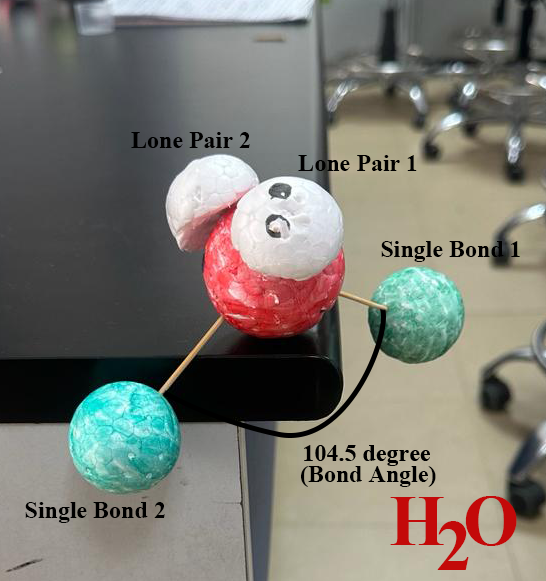
<style>
.page{position:relative;width:546px;height:581px}
.page>*{position:absolute;margin:0}
.t1{font:24px "TimesNewRomanPS-BoldMT";color:#000000}
.t2{font:72px "TimesNewRomanPS-BoldMT";color:#c30909}
</style>
<div class="page">
<p class="t1" style="left:131px;top:132px;width:119px;height:16px">Lone Pair 2</p>
<p class="t1" style="left:298px;top:155px;width:119px;height:16px">Lone Pair 1</p>
<p class="t1" style="left:381px;top:241px;width:139px;height:21px">Single Bond 1</p>
<p class="t1" style="left:301px;top:466px;width:135px;height:21px">(Bond Angle)</p>
<p class="t2" style="left:390px;top:496px;width:127px;height:50px">H O</p>
<p class="t1" style="left:25px;top:502px;width:140px;height:21px">Single Bond 2</p>
<p class="t2" style="left:437px;top:521px;width:32px;height:49px">2</p>
</div>
